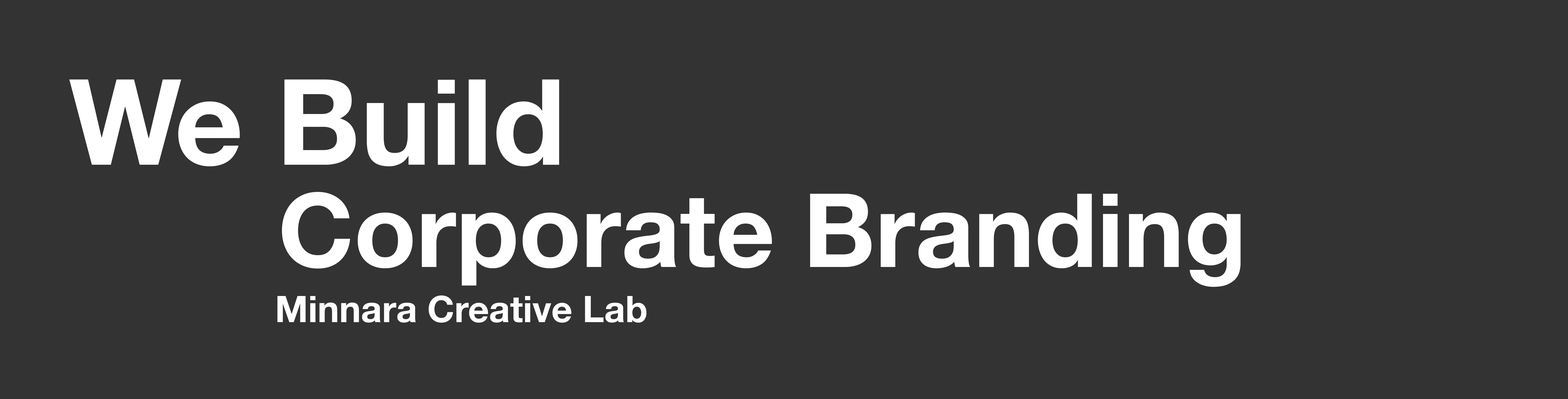
<style>
.page{position:relative;width:1568px;height:399px;background:#333333}
.page>*{position:absolute;margin:0}
.t1{font:119.2px "HelveticaNeue-Bold";color:#ffffff}
.t2{font:102.4px "HelveticaNeue-Bold";color:#ffffff}
.t3{font:36.6px "HelveticaNeue-Bold";color:#ffffff}
</style>
<div class="page">
<p class="t1" style="left:69px;top:79px;width:490px;height:87px">We Build</p>
<p class="t2" style="left:282px;top:192px;width:959px;height:95px">Corporate Branding</p>
<p class="t3" style="left:277px;top:295px;width:370px;height:27px">Minnara Creative Lab</p>
</div>
